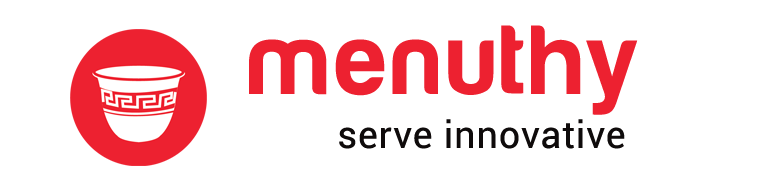
<style>
.page{position:relative;width:779px;height:175px;background:#ffffff}
.page>*{position:absolute;margin:0}
.t1{font:100px "HarabaraMaisBold-HarabaraMaisBold";color:#ed2130;font-weight:bold}
.t2{font:37.5px "Roboto-Regular";color:#0f0b0b;font-weight:bold}
</style>
<div class="page">
<p class="t1" style="left:249px;top:25px;width:389px;height:90px">menuthy</p>
<p class="t2" style="left:339px;top:119px;width:286px;height:30px">serve innovative</p>
</div>
